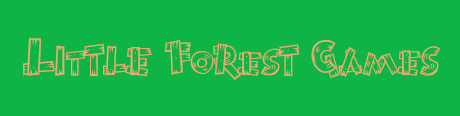
<style>
.page{position:relative;width:460px;height:116px;background:#0eb445}
.page>*{position:absolute;margin:0}
.t1{font:57.3px "BurnstownDam-Regular";letter-spacing:-0.03em;color:#e4ad72}
.t2{font:59.6px "BurnstownDam-Regular";letter-spacing:-0.03em;color:#e4ad72;scale:1.05 1}
.t3{font:50.4px "BurnstownDam-Regular";letter-spacing:-0.03em;color:#e4ad72;scale:1.17 1}
.t4{font:65.4px "BurnstownDam-Regular";letter-spacing:-0.03em;color:#e4ad72;scale:0.95 1}
.t5{font:47px "BurnstownDam-Regular";letter-spacing:-0.03em;color:#e4ad72;scale:1.06 1}
.t6{font:55px "BurnstownDam-Regular";letter-spacing:-0.03em;color:#e4ad72}
.t7{font:47px "BurnstownDam-Regular";letter-spacing:-0.03em;color:#e4ad72;scale:1.17 1}
.t8{font:52.2px "BurnstownDam-Regular";letter-spacing:-0.03em;color:#e4ad72;scale:1.1 1}
.t9{font:63.6px "BurnstownDam-Regular";letter-spacing:-0.03em;color:#e4ad72;scale:0.96 1}
.t10{font:51.6px "BurnstownDam-Regular";letter-spacing:-0.03em;color:#e4ad72;scale:0.97 1}
.t11{font:45.9px "BurnstownDam-Regular";letter-spacing:-0.03em;color:#e4ad72}
.t12{font:49.9px "BurnstownDam-Regular";letter-spacing:-0.03em;color:#e4ad72;scale:1.03 1}
</style>
<div class="page">
<p class="t1" style="left:23px;top:38px;width:417px;height:42px"><span class="t2">L</span>i<span class="t3">t</span><span class="t4">t</span>le F<span class="t5">o</span><span class="t6">r</span><span class="t7">e</span><span class="t8">s</span><span class="t9">t</span> G<span class="t10">a</span><span class="t11">m</span><span class="t12">e</span>s</p>
</div>
